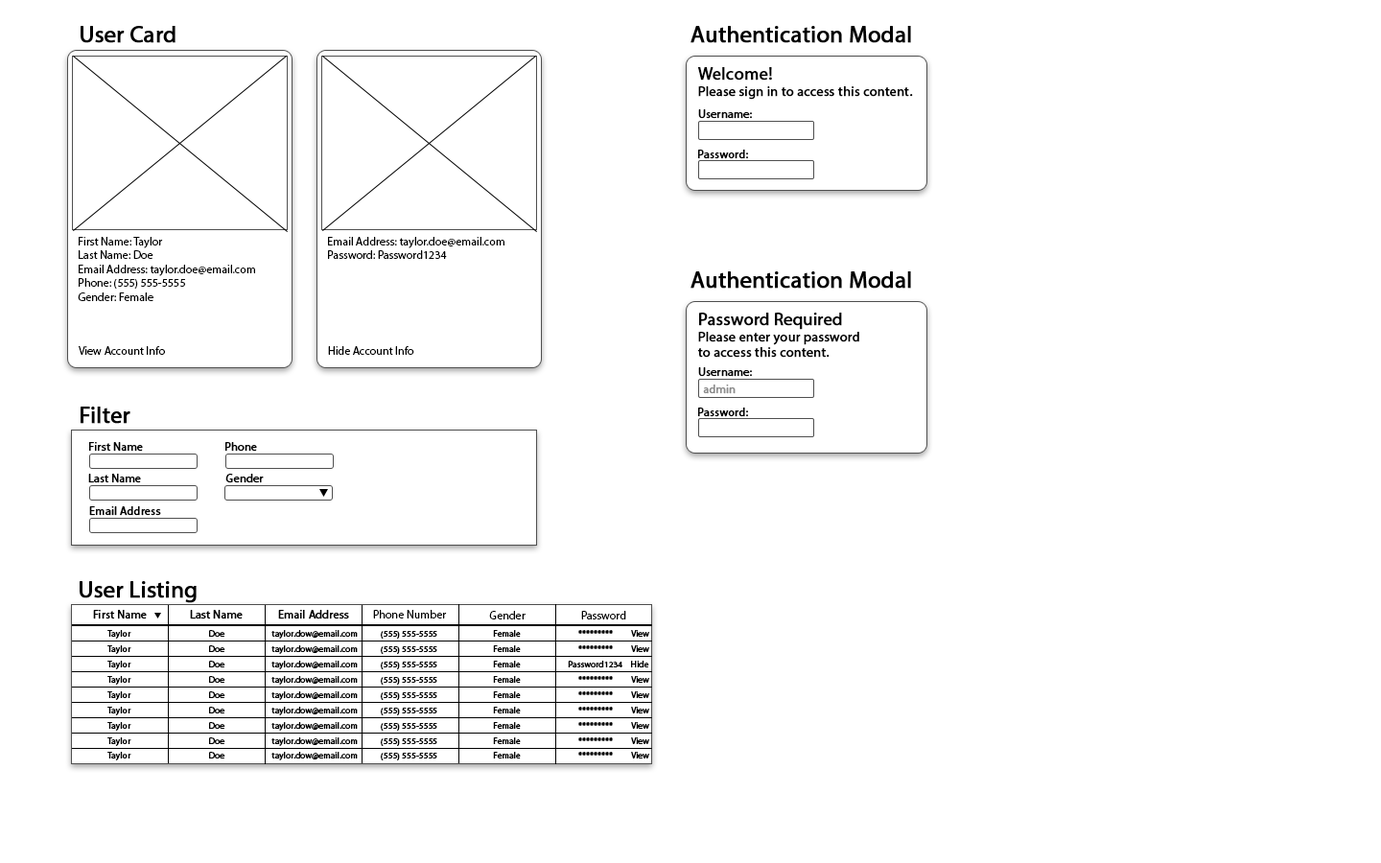
<style>
.page{position:relative;width:1381px;height:863px;background:#ffffff}
.page>*{position:absolute;margin:0}
.t1{font:23px "MyriadPro-Regular";color:#000000;font-weight:bold}
.t2{font:17.3px "MyriadPro-Regular";color:#000000;font-weight:bold}
.t3{font:13.4px "MyriadPro-Regular";color:#000000;font-weight:bold}
.t4{font:11.5px "MyriadPro-Regular";color:#000000;font-weight:bold}
.t5{font:11.5px "MyriadPro-Regular";color:#000000}
.t6{font:11.5px "MyriadPro-Regular";color:#8d8d8d;font-weight:bold}
.t7{font:8.6px "MyriadPro-Regular";color:#000000;font-weight:bold}
</style>
<div class="page">
<p class="t1" style="left:81px;top:26px;width:95px;height:17px">User Card</p>
<p class="t1" style="left:691px;top:26px;width:220px;height:17px">Authentication Modal</p>
<p class="t2" style="left:697px;top:67px;width:75px;height:14px">Welcome!</p>
<p class="t3" style="left:698px;top:86px;width:215px;height:14px">Please sign in to access this content.</p>
<p class="t4" style="left:698px;top:109px;width:54px;height:10px">Username:</p>
<p class="t4" style="left:698px;top:150px;width:50px;height:9px">Password:</p>
<p class="t5" style="left:78px;top:237px;width:177px;height:64px">First Name: Taylor<br>Last Name: Doe<br>Email Address: taylor.doe@email.com<br>Phone: (555) 555-5555<br>Gender: Female</p>
<p class="t5" style="left:328px;top:237px;width:177px;height:22px">Email Address: taylor.doe@email.com<br>Password: Password1234</p>
<p class="t1" style="left:691px;top:271px;width:220px;height:18px">Authentication Modal</p>
<p class="t2" style="left:699px;top:313px;width:143px;height:17px">Password Required</p>
<p class="t3" style="left:698px;top:332px;width:161px;height:26px">Please enter your password<br>to access this content.</p>
<p class="t5" style="left:79px;top:346px;width:86px;height:9px">View Account Info</p>
<p class="t5" style="left:328px;top:346px;width:86px;height:9px">Hide Account Info</p>
<p class="t4" style="left:698px;top:367px;width:54px;height:10px">Username:</p>
<p class="t6" style="left:703px;top:385px;width:33px;height:9px">admin</p>
<p class="t1" style="left:81px;top:407px;width:49px;height:17px">Filter</p>
<p class="t4" style="left:698px;top:408px;width:50px;height:9px">Password:</p>
<p class="t4" style="left:89px;top:442px;width:54px;height:10px">First Name</p>
<p class="t4" style="left:225px;top:442px;width:32px;height:10px">Phone</p>
<p class="t4" style="left:88px;top:474px;width:53px;height:9px">Last Name</p>
<p class="t4" style="left:225px;top:474px;width:39px;height:9px">Gender</p>
<p class="t4" style="left:89px;top:506px;width:72px;height:10px">Email Address</p>
<p class="t1" style="left:80px;top:581px;width:117px;height:22px">User Listing</p>
<p class="t4" style="left:93px;top:610px;width:54px;height:10px">First Name</p>
<p class="t4" style="left:190px;top:610px;width:53px;height:10px">Last Name</p>
<p class="t4" style="left:278px;top:610px;width:71px;height:10px">Email Address</p>
<p class="t5" style="left:373px;top:610px;width:74px;height:9px">Phone Number</p>
<p class="t5" style="left:489px;top:611px;width:37px;height:9px">Gender</p>
<p class="t5" style="left:581px;top:611px;width:45px;height:9px">Password</p>
<p class="t7" style="left:107px;top:630px;width:542px;height:9px">Taylor                                      Doe                       taylor.dow@email.com           (555) 555-5555                           Female                            *********         View</p>
<p class="t7" style="left:107px;top:646px;width:542px;height:8px">Taylor                                      Doe                       taylor.dow@email.com           (555) 555-5555                           Female                            *********         View</p>
<p class="t7" style="left:107px;top:661px;width:542px;height:9px">Taylor                                      Doe                       taylor.dow@email.com           (555) 555-5555                           Female                       Password1234    Hide</p>
<p class="t7" style="left:107px;top:676px;width:542px;height:9px">Taylor                                      Doe                       taylor.dow@email.com           (555) 555-5555                           Female                            *********         View</p>
<p class="t7" style="left:107px;top:692px;width:542px;height:8px">Taylor                                      Doe                       taylor.dow@email.com           (555) 555-5555                           Female                            *********         View</p>
<p class="t7" style="left:107px;top:707px;width:542px;height:9px">Taylor                                      Doe                       taylor.dow@email.com           (555) 555-5555                           Female                            *********         View</p>
<p class="t7" style="left:107px;top:722px;width:542px;height:9px">Taylor                                      Doe                       taylor.dow@email.com           (555) 555-5555                           Female                            *********         View</p>
<p class="t7" style="left:107px;top:738px;width:542px;height:8px">Taylor                                      Doe                       taylor.dow@email.com           (555) 555-5555                           Female                            *********         View</p>
<p class="t7" style="left:107px;top:752px;width:542px;height:9px">Taylor                                      Doe                       taylor.dow@email.com           (555) 555-5555                           Female                            *********         View</p>
</div>
